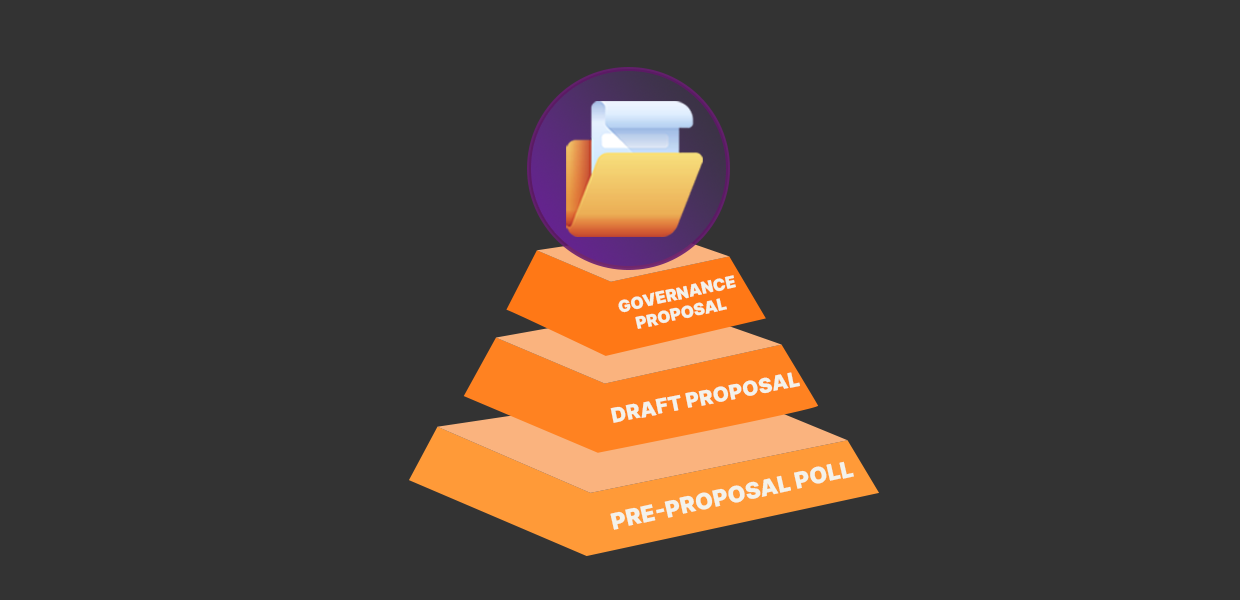
<style>
.page{position:relative;width:1240px;height:600px;background:#333333}
.page>*{position:absolute;margin:0}
.t1{font:16.3px "Inter-Black";color:#f3f2eb;text-transform:uppercase}
.t2{font:20.4px "Inter-Black";color:#f3f2eb;text-transform:uppercase}
.t3{font:22.6px "Inter-Black";color:#f3f2eb;text-transform:uppercase}
</style>
<div class="page">
<p class="t1" style="left:618px;top:275px;width:118px;height:54px;rotate:-13deg">Governance ProposaL</p>
<p class="t2" style="left:610px;top:372px;width:190px;height:51px;rotate:-11deg">Draft Proposal</p>
<p class="t3" style="left:610px;top:461px;width:244px;height:69px;rotate:-13deg">Pre-Proposal Poll</p>
</div>
